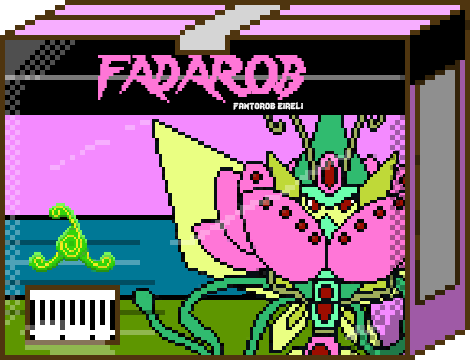
<style>
.page{position:relative;width:470px;height:360px}
.page>*{position:absolute;margin:0}
.t1{font:48px "Lady-Radical";color:#ff76d7;scale:0.72 1}
.t2{font:12px "Lady-Radical";color:#fbfbfb}
</style>
<div class="page">
<p class="t1" style="left:98px;top:55px;width:208px;height:48px">FADAROB</p>
<p class="t2" style="left:233px;top:102px;width:70px;height:8px">fantorob eireli</p>
</div>
